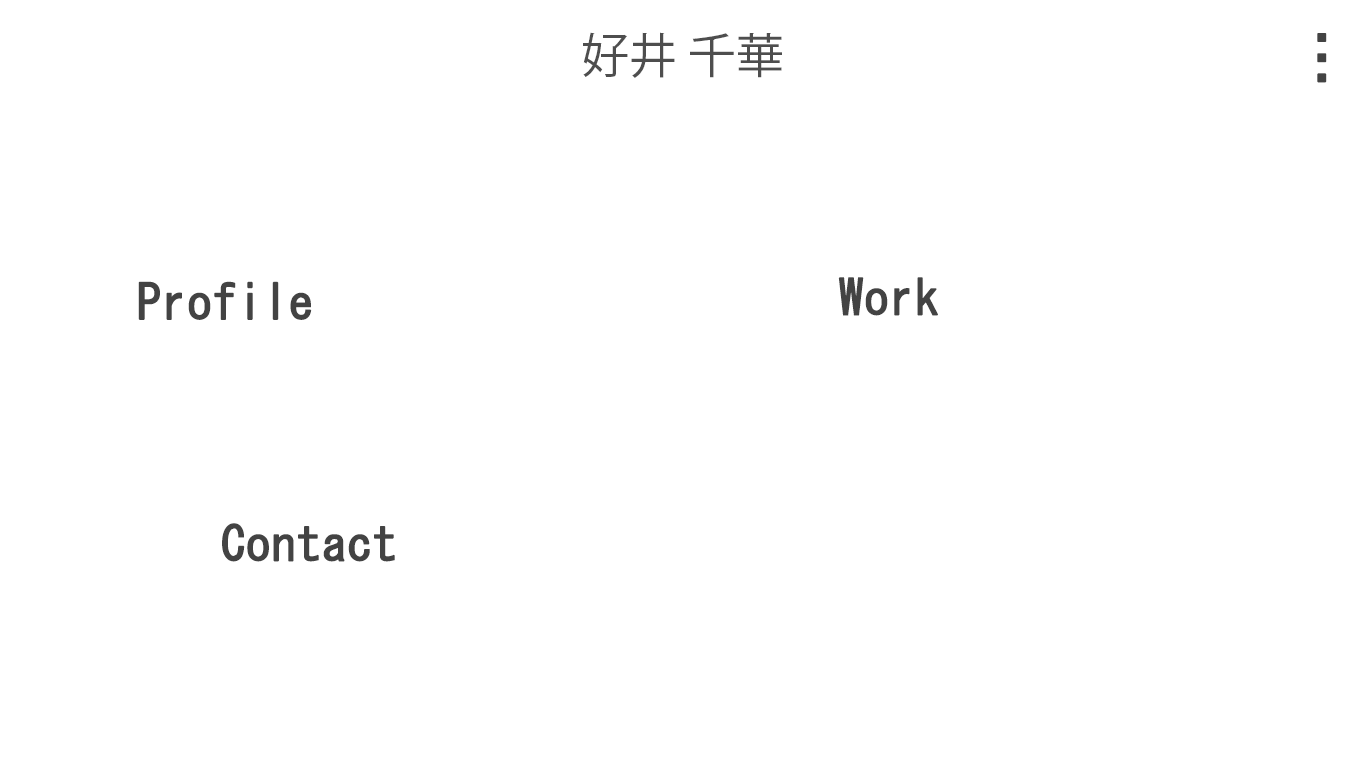
<style>
.page{position:relative;width:1366px;height:768px;background:#ffffff}
.page>*{position:absolute;margin:0}
.t1{font:48px "KozGoPr6N-Regular";color:#4e4e4e}
.t2{font:60px "MS-Gothic";color:#434343;font-weight:bold}
.t3{font:48px "MS-Gothic";color:#434343;font-weight:bold}
</style>
<div class="page">
<p class="t1" style="left:583px;top:32px;width:199px;height:46px">好井 千華</p>
<p class="t2" style="left:1317px;top:33px;width:10px;height:50px;rotate:90deg">…</p>
<p class="t3" style="left:138px;top:281px;width:174px;height:39px">Profile</p>
<p class="t3" style="left:838px;top:277px;width:100px;height:39px">Work</p>
<p class="t3" style="left:222px;top:523px;width:173px;height:39px">Contact</p>
</div>
